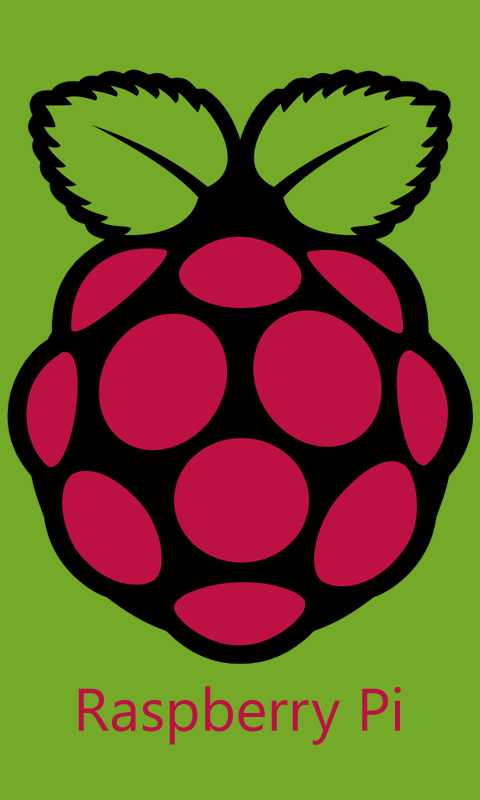
<style>
.page{position:relative;width:480px;height:800px;background:#75a928}
.page>*{position:absolute;margin:0}
.t1{font:60px "SegoeWP";color:#bc1142}
</style>
<div class="page">
<p class="t1" style="left:78px;top:686px;width:323px;height:59px">Raspberry Pi</p>
</div>
